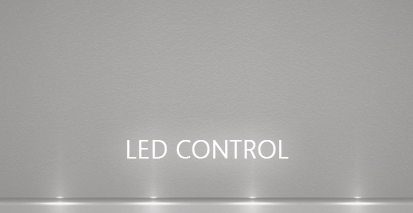
<style>
.page{position:relative;width:413px;height:213px}
.page>*{position:absolute;margin:0}
.t1{font:25px "SegoeUI-Light";color:#fefefe;font-weight:bold}
</style>
<div class="page">
<p class="t1" style="left:127px;top:140px;width:162px;height:19px">LED CONTROL</p>
</div>
